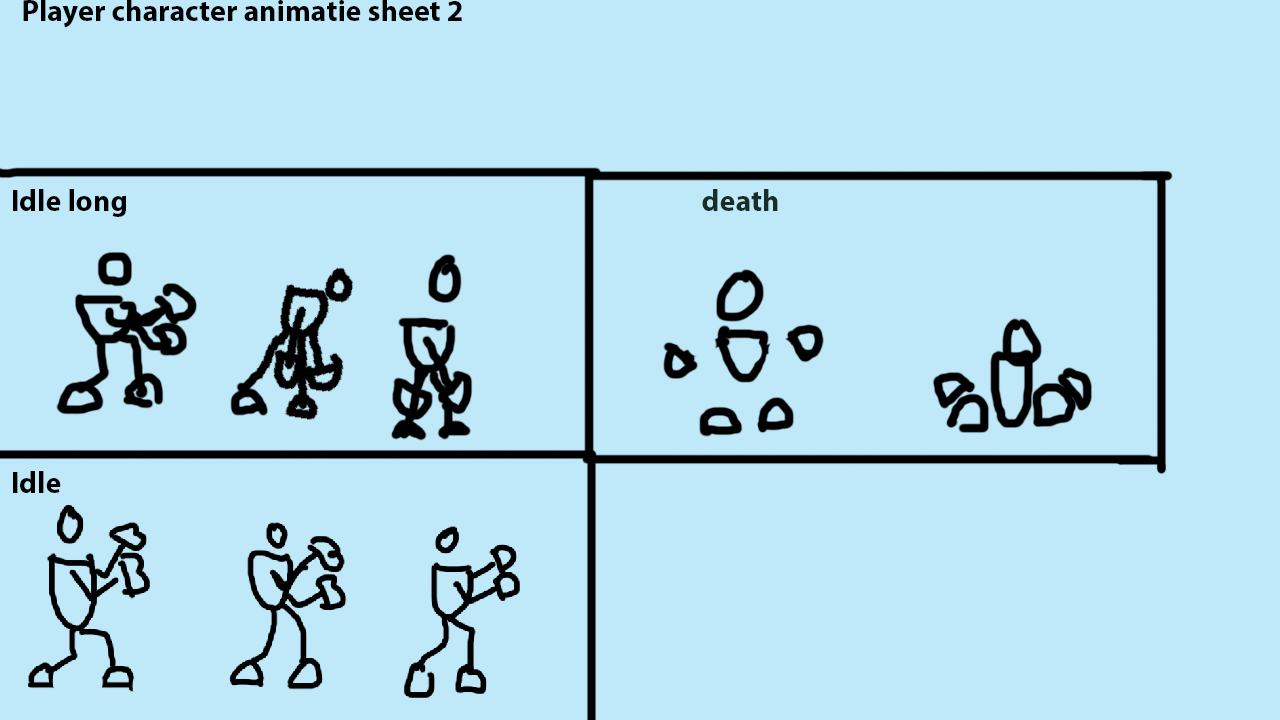
<style>
.page{position:relative;width:1280px;height:720px;background:#bfe8f9}
.page>*{position:absolute;margin:0}
.t1{font:30px "MyriadPro-Bold";color:#000000}
.t2{font:30px "MyriadPro-Bold";color:#182e25}
</style>
<div class="page">
<p class="t1" style="left:23px;top:0px;width:439px;height:28px">Player character animatie sheet 2</p>
<p class="t1" style="left:13px;top:189px;width:113px;height:28px">Idle long</p>
<p class="t2" style="left:702px;top:189px;width:76px;height:22px">death</p>
<p class="t1" style="left:13px;top:471px;width:48px;height:22px">Idle</p>
</div>
